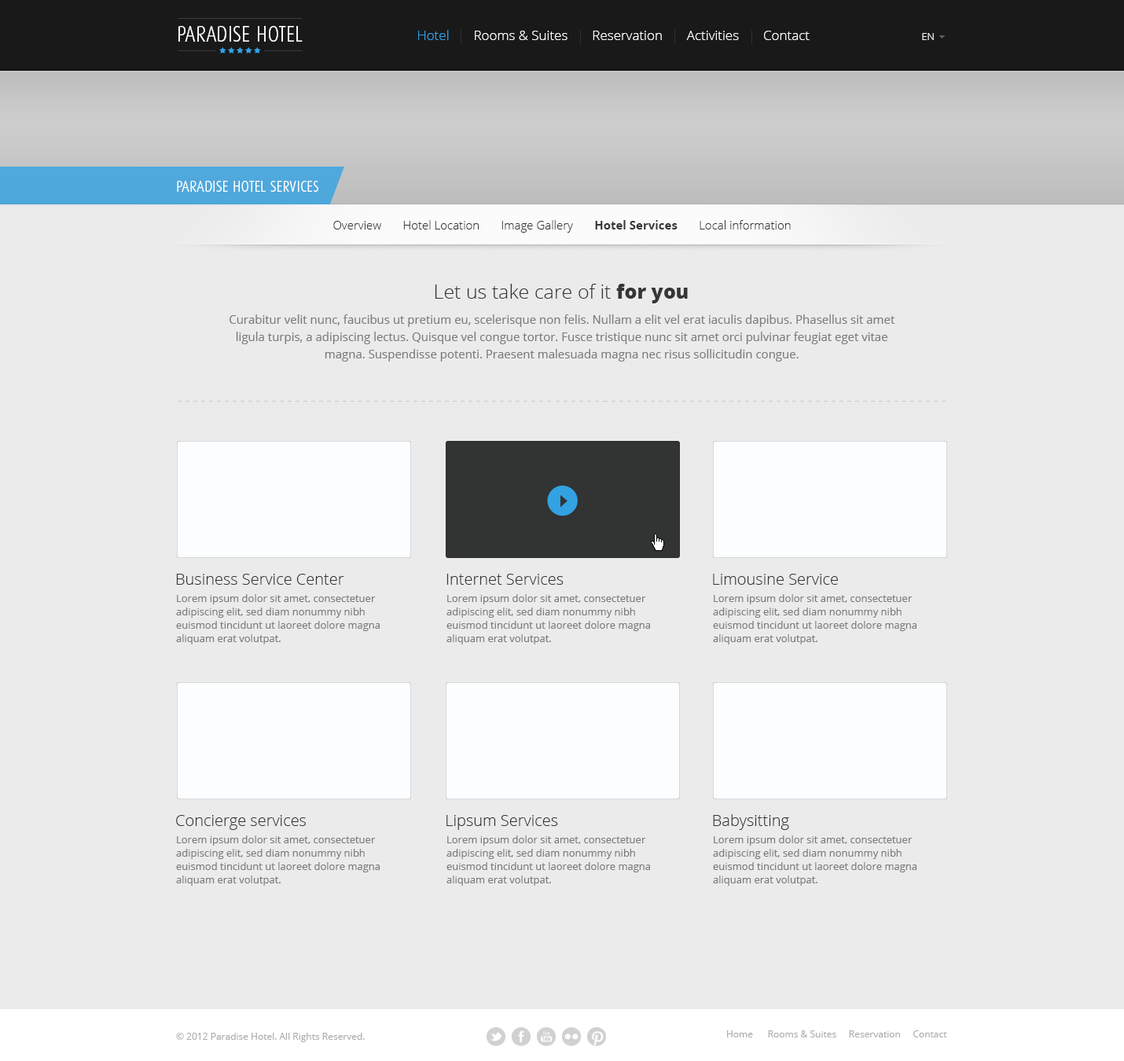
<style>
.page{position:relative;width:1124px;height:1061px;background:#ebebeb}
.page>*{position:absolute;margin:0}
.t1{font:22px "DaxCondensed-Light";color:#ffffff;text-transform:uppercase}
.t2{font:13.4px "OpenSans-Light";color:#ffffff}
.t3{font:13.4px "OpenSans-Light";color:#32a2e3}
.t4{font:10.2px "OpenSans-Light";color:#ffffff}
.t5{font:15.7px "DaxCondensed-Light";color:#ffffff;text-transform:uppercase}
.t6{font:11.8px "OpenSans-Light";color:#373535}
.t7{font:11.8px "OpenSans-Bold";color:#373535}
.t8{font:19.6px "OpenSans-Light";color:#373535}
.t9{font:19.6px "OpenSans-Extrabold";color:#373535}
.t10{font:11.8px/17.3px "OpenSans";color:#7d7c7c}
.t11{font:15.7px "OpenSans-Light";color:#373535}
.t12{font:10.2px/13.4px "OpenSans";color:#7d7c7c}
.t13{font:9.4px "OpenSans";color:#aeadad}
</style>
<div class="page">
<p class="t1" style="left:178px;top:26px;width:125px;height:16px">Paradise hotel</p>
<p class="t2" style="left:418px;top:30px;width:392px;height:10px"><span class="t3">Hotel</span>       Rooms &amp; Suites       Reservation       Activities       Contact</p>
<p class="t4" style="left:922px;top:33px;width:12px;height:7px">EN</p>
<p class="t5" style="left:177px;top:181px;width:141px;height:11px">paradise hotel Services</p>
<p class="t6" style="left:333px;top:220px;width:458px;height:13px">Overview       Hotel Location       Image Gallery<span class="t7">       Hotel Services       </span>Local information</p>
<p class="t8" style="left:435px;top:284px;width:253px;height:19px">Let us take care of it <span class="t9">for you</span></p>
<p class="t10" style="left:229px;top:314px;width:666px;height:48px;text-align:center">Curabitur velit nunc, faucibus ut pretium eu, scelerisque non felis. Nullam a elit vel erat iaculis dapibus. Phasellus sit amet ligula turpis, a adipiscing lectus. Quisque vel congue tortor. Fusce tristique nunc sit amet orci pulvinar feugiat eget vitae magna. Suspendisse potenti. Praesent malesuada magna nec risus sollicitudin congue.</p>
<p class="t11" style="left:176px;top:574px;width:168px;height:11px">Business Service Center</p>
<p class="t11" style="left:446px;top:574px;width:118px;height:11px">Internet Services</p>
<p class="t11" style="left:713px;top:574px;width:125px;height:11px">Limousine Service</p>
<p class="t12" style="left:176px;top:594px;width:204px;height:50px">Lorem ipsum dolor sit amet, consectetuer<br>adipiscing elit, sed diam nonummy nibh<br>euismod tincidunt ut laoreet dolore magna<br>aliquam erat volutpat.</p>
<p class="t12" style="left:446px;top:594px;width:204px;height:50px">Lorem ipsum dolor sit amet, consectetuer<br>adipiscing elit, sed diam nonummy nibh<br>euismod tincidunt ut laoreet dolore magna<br>aliquam erat volutpat.</p>
<p class="t12" style="left:713px;top:594px;width:203px;height:50px">Lorem ipsum dolor sit amet, consectetuer<br>adipiscing elit, sed diam nonummy nibh<br>euismod tincidunt ut laoreet dolore magna<br>aliquam erat volutpat.</p>
<p class="t11" style="left:176px;top:815px;width:130px;height:15px">Concierge services</p>
<p class="t11" style="left:446px;top:815px;width:112px;height:15px">Lipsum Services</p>
<p class="t11" style="left:713px;top:814px;width:76px;height:16px">Babysitting</p>
<p class="t12" style="left:176px;top:835px;width:204px;height:51px">Lorem ipsum dolor sit amet, consectetuer<br>adipiscing elit, sed diam nonummy nibh<br>euismod tincidunt ut laoreet dolore magna<br>aliquam erat volutpat.</p>
<p class="t12" style="left:446px;top:835px;width:204px;height:51px">Lorem ipsum dolor sit amet, consectetuer<br>adipiscing elit, sed diam nonummy nibh<br>euismod tincidunt ut laoreet dolore magna<br>aliquam erat volutpat.</p>
<p class="t12" style="left:713px;top:835px;width:203px;height:51px">Lorem ipsum dolor sit amet, consectetuer<br>adipiscing elit, sed diam nonummy nibh<br>euismod tincidunt ut laoreet dolore magna<br>aliquam erat volutpat.</p>
<p class="t13" style="left:176px;top:1033px;width:189px;height:9px">© 2012 Paradise Hotel. All Rights Reserved.</p>
<p class="t13" style="left:727px;top:1030px;width:220px;height:7px">Home      Rooms &amp; Suites     Reservation     Contact</p>
</div>
